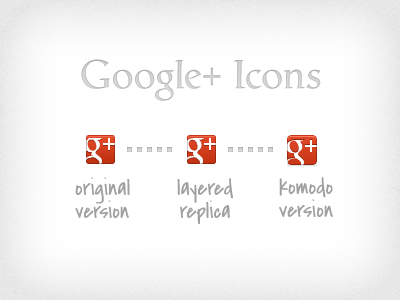
<style>
.page{position:relative;width:400px;height:300px;background:#ffffff}
.page>*{position:absolute;margin:0}
.t1{font:40px "Catull-Regular";color:#dedede}
.t2{font:39.6px "Catull-Regular";color:#ffffff;scale:1.09 1}
.t3{font:23px/23px "CoveredByYourGrace";color:#a0a0a0}
</style>
<div class="page">
<p class="t1" style="left:81px;top:59px;width:240px;height:42px">Google+ Icons</p>
<p class="t2" style="left:182px;top:138px;width:22px;height:31px">g</p>
<p class="t2" style="left:283px;top:139px;width:22px;height:31px">g</p>
<p class="t3" style="left:75px;top:177px;width:55px;height:41px">original<br>version</p>
<p class="t3" style="left:177px;top:178px;width:56px;height:46px;text-align:center">layered<br>replica</p>
<p class="t3" style="left:279px;top:177px;width:54px;height:40px;text-align:center">komodo<br>version</p>
</div>
